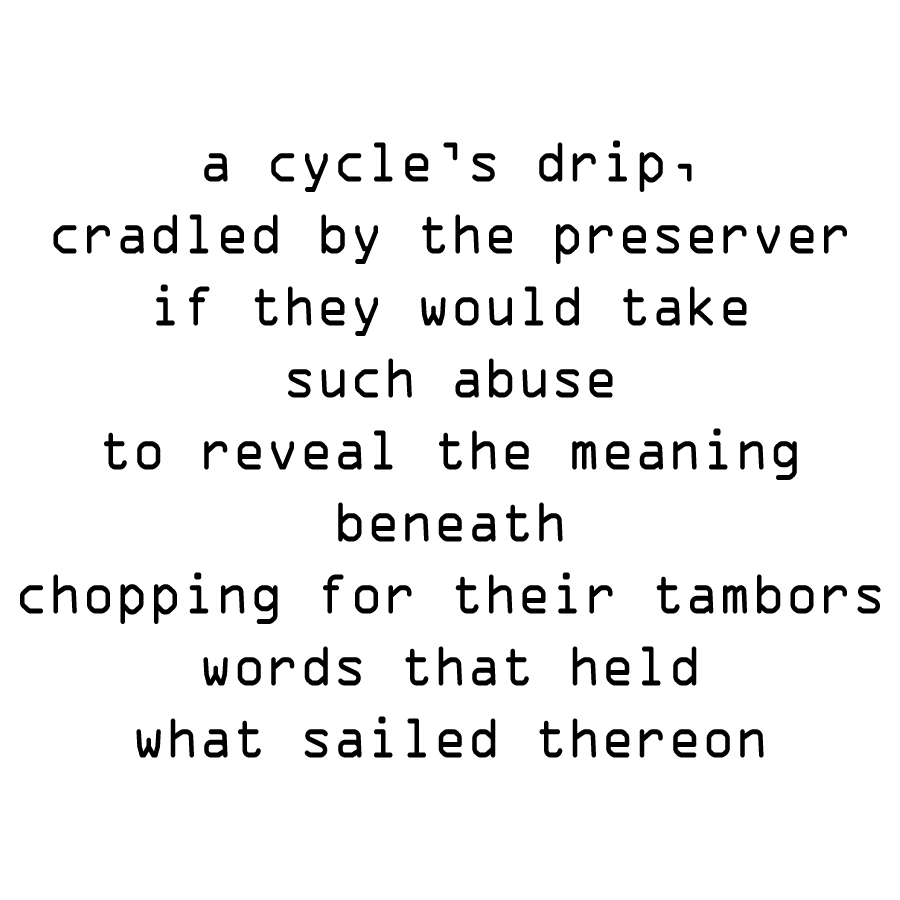
<style>
.page{position:relative;width:900px;height:900px;background:#ffffff}
.page>*{position:absolute;margin:0}
.t1{font:60px "OCRAExtended";color:#000000;scale:0.92 1}
</style>
<div class="page">
<p class="t1" style="left:20px;top:140px;width:861px;height:618px;text-align:center">a cycle’s drip,<br>cradled by the preserver<br>if they would take<br>such abuse<br>to reveal the meaning<br>beneath<br>chopping for their tambors<br>words that held<br>what sailed thereon</p>
</div>
